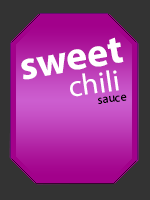
<style>
.page{position:relative;width:150px;height:200px;background:#333333}
.page>*{position:absolute;margin:0}
.t1{font:40px "MyriadPro-Bold";color:#ffffff}
.t2{font:30px "MyriadPro-Regular";color:#ffffff}
.t3{font:12px "MyriadPro-Regular";color:#000000}
</style>
<div class="page">
<p class="t1" style="left:21px;top:37px;width:103px;height:43px;rotate:-10deg">sweet</p>
<p class="t2" style="left:70px;top:70px;width:49px;height:27px;rotate:-8deg">chili</p>
<p class="t3" style="left:98px;top:94px;width:29px;height:10px;rotate:-7deg">sauce</p>
</div>
